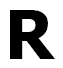
<style>
.page{position:relative;width:63px;height:68px;background:#ffffff}
.page>*{position:absolute;margin:0}
.t1{font:66.7px "Tahoma-Bold";color:#000000}
</style>
<div class="page">
<p class="t1" style="left:10px;top:10px;width:45px;height:49px">R</p>
</div>
